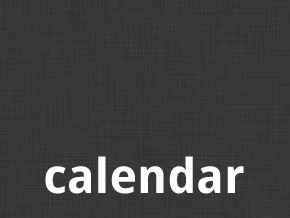
<style>
.page{position:relative;width:290px;height:218px}
.page>*{position:absolute;margin:0}
.t1{font:48px "DroidSans-Bold";color:#fdfdfd}
</style>
<div class="page">
<p class="t1" style="left:45px;top:156px;width:199px;height:38px">calendar</p>
</div>
